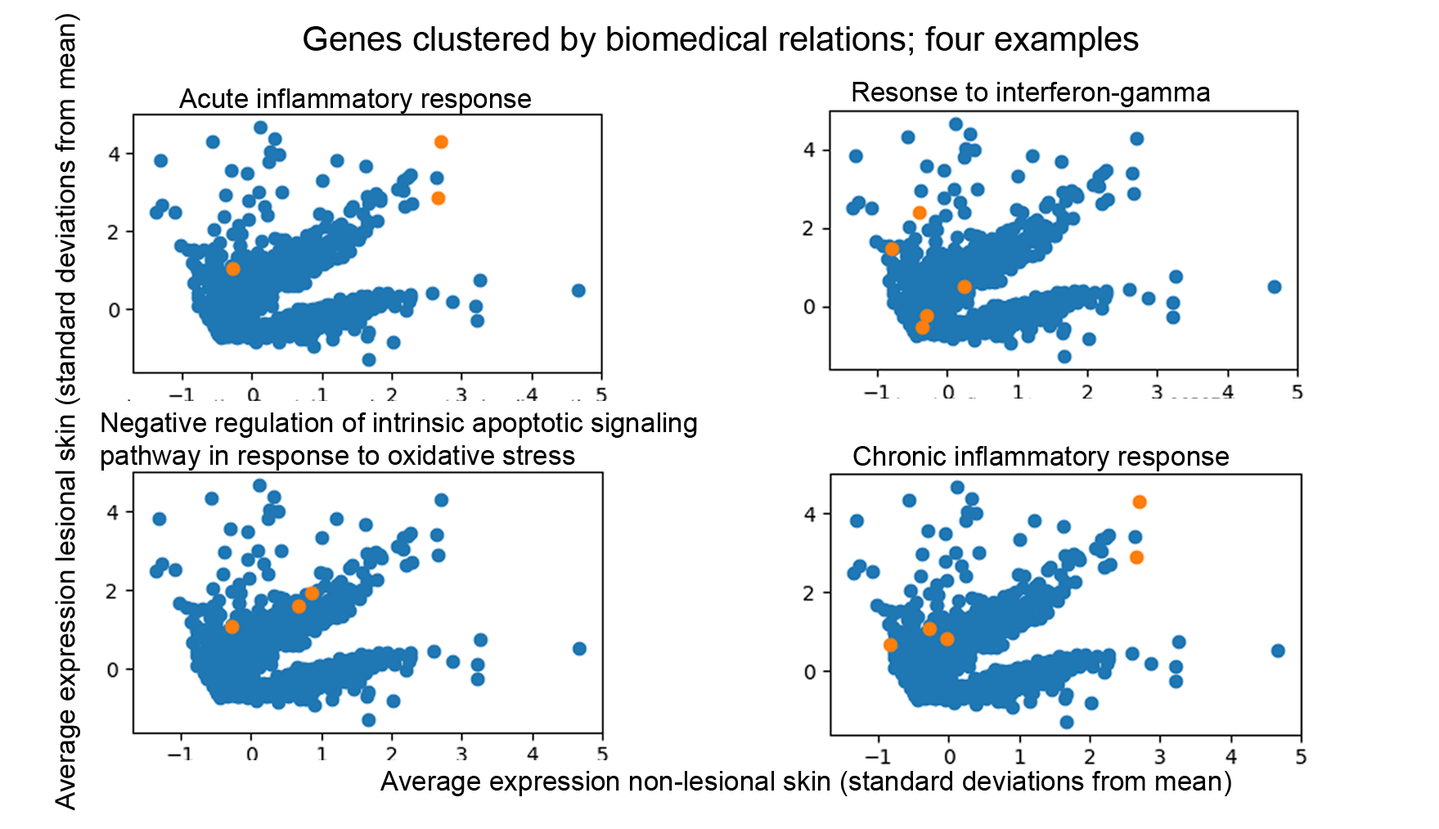
<style>
.page{position:relative;width:1439px;height:829px;background:#ffffff}
.page>*{position:absolute;margin:0}
.t1{font:27px "ArialMT";color:#000000}
.t2{font:34.1px "ArialMT";color:#000000}
.t3{font:27.3px "ArialMT";color:#000000}
</style>
<div class="page">
<p class="t1" style="left:55px;top:14px;width:25px;height:797px;rotate:-90deg">Average expression lesional skin (standard deviations from mean)</p>
<p class="t2" style="left:303px;top:26px;width:836px;height:31px">Genes clustered by biomedical relations; four examples</p>
<p class="t3" style="left:179px;top:88px;width:352px;height:26px">Acute inflammatory response</p>
<p class="t3" style="left:852px;top:82px;width:358px;height:25px">Resonse to interferon-gamma</p>
<p class="t3" style="left:101px;top:412px;width:596px;height:58px">Negative regulation of intrinsic apoptotic signaling <br>pathway in response to oxidative stress</p>
<p class="t3" style="left:853px;top:446px;width:376px;height:25px">Chronic inflammatory response</p>
<p class="t3" style="left:380px;top:771px;width:851px;height:25px">Average expression non-lesional skin (standard deviations from mean)</p>
</div>
